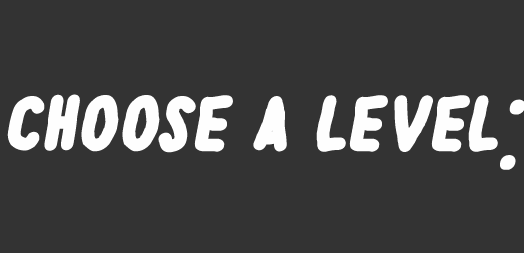
<style>
.page{position:relative;width:524px;height:253px;background:#333333}
.page>*{position:absolute;margin:0}
.t1{font:129.4px "BeautifulHeartbeat";color:#fefefe;font-weight:bold;font-style:italic}
</style>
<div class="page">
<p class="t1" style="left:7px;top:94px;width:519px;height:76px">choose a level:</p>
</div>
